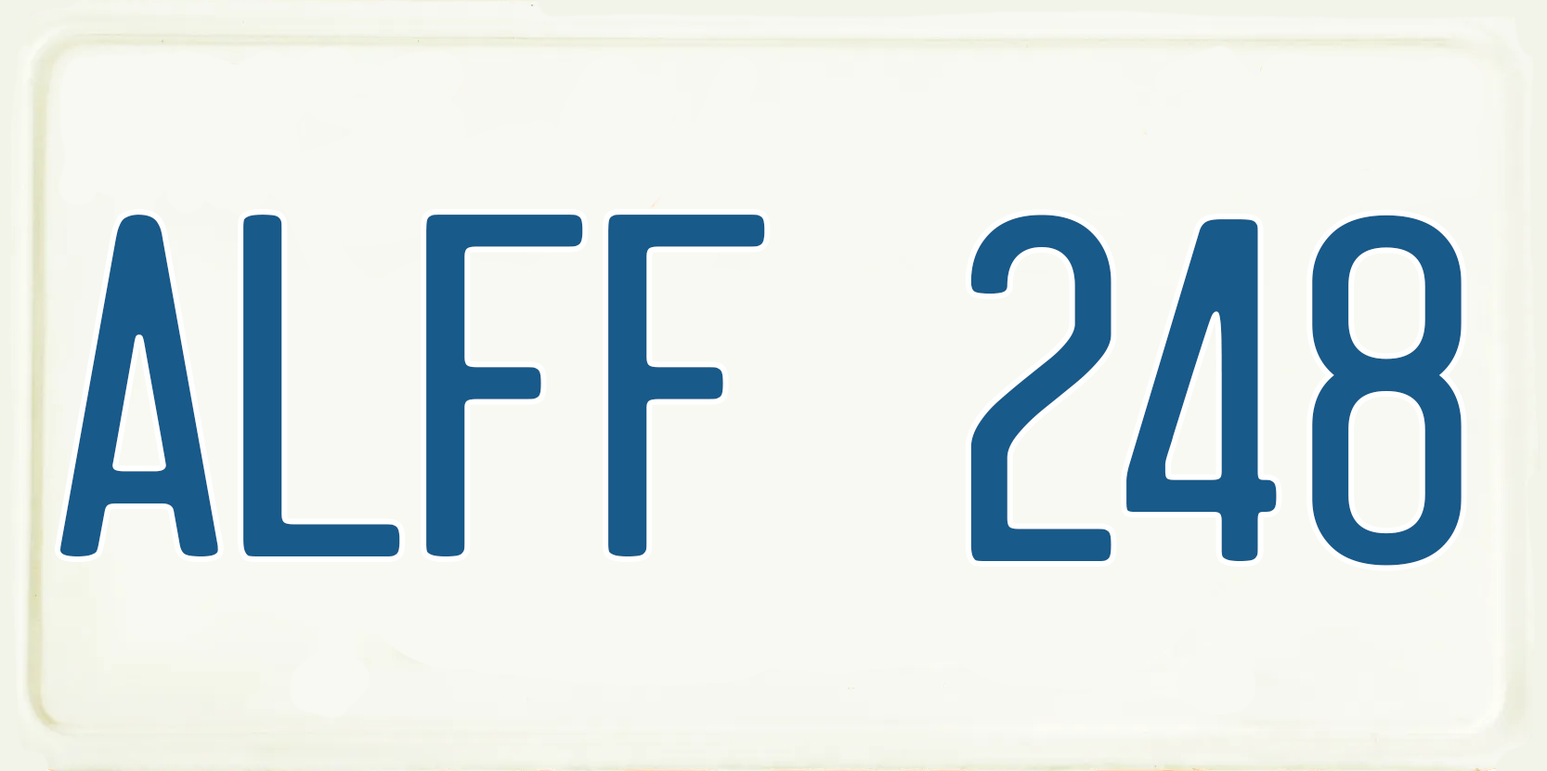
<style>
.page{position:relative;width:1547px;height:771px;background:#f8f9f2}
.page>*{position:absolute;margin:0}
.t1{font:427px "DriverGothic";color:#185a8a;scale:1.12 1}
.t2{font:427px "DriverGothic";color:#185a8a;scale:1.06 1}
</style>
<div class="page">
<p class="t1" style="left:60px;top:215px;width:705px;height:341px">ALFF</p>
<p class="t2" style="left:970px;top:215px;width:492px;height:351px">248</p>
</div>
